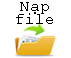
<style>
.page{position:relative;width:71px;height:58px;background:#ffffff}
.page>*{position:absolute;margin:0}
.t1{font:12px/13.3px "CourierNewPSMT";color:#000000}
</style>
<div class="page">
<p class="t1" style="left:16px;top:2px;width:37px;height:22px;text-align:center">Nạp<br>file</p>
</div>
